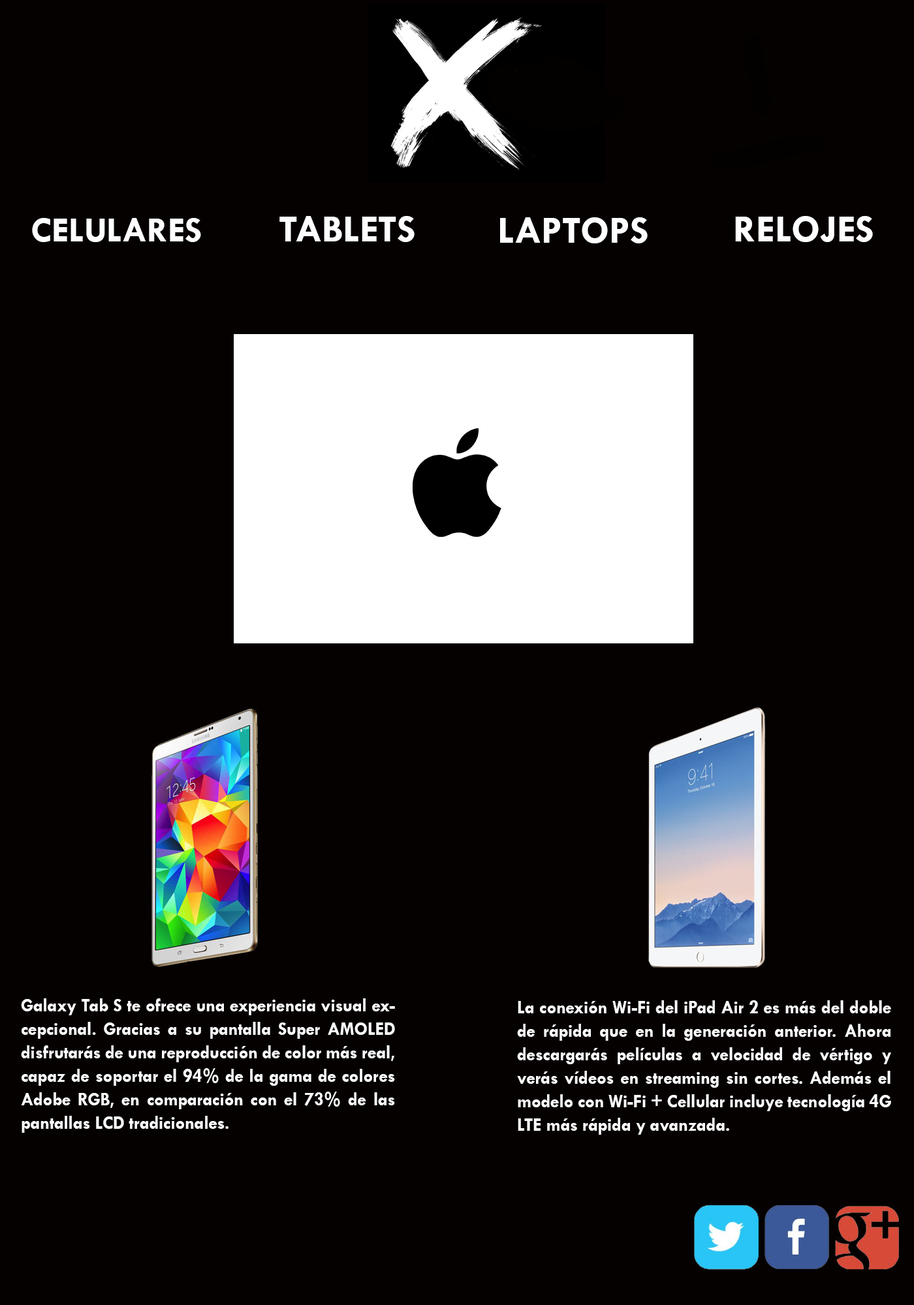
<style>
.page{position:relative;width:914px;height:1305px;background:#040100}
.page>*{position:absolute;margin:0}
.t1{font:35.9px "TwCenMT-Bold";color:#fefefe}
.t2{font:19.6px "TwCenMT-Bold";color:#fefefe}
.t3{font:39.2px "TwCenMT-Bold";color:#fefefe}
.t4{font:19.6px "TwCenMT-Bold";color:#fefefe;scale:0.92 1}
</style>
<div class="page">
<p class="t1" style="left:32px;top:218px;width:169px;height:24px"><span class="t2"><br></span>CELULARES</p>
<p class="t3" style="left:279px;top:216px;width:135px;height:26px">TABLETS</p>
<p class="t3" style="left:500px;top:217px;width:147px;height:26px">LAPTOPS</p>
<p class="t3" style="left:735px;top:216px;width:138px;height:26px">RELOJES</p>
<p class="t4" style="left:21px;top:998px;width:374px;height:135px;text-align:justify">Galaxy Tab S te ofrece una experiencia visual excepcional. Gracias a su pantalla Super AMOLED disfrutarás de una reproducción de color más real, capaz de soportar el 94% de la gama de colores Adobe RGB, en comparación con el 73% de las pantallas LCD tradicionales.</p>
<p class="t4" style="left:517px;top:1000px;width:374px;height:135px;text-align:justify">La conexión Wi‑Fi del iPad Air 2 es más del doble de rápida que en la generación anterior. Ahora descargarás películas a velocidad de vértigo y verás vídeos en streaming sin cortes. Además el modelo con Wi‑Fi + Cellular incluye tecnología 4G LTE más rápida y avanzada.</p>
</div>
